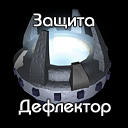
<style>
.page{position:relative;width:128px;height:128px;background:#000000}
.page>*{position:absolute;margin:0}
.t1{font:18px "BauhausC-Medium";color:#ffffff;font-weight:bold}
</style>
<div class="page">
<p class="t1" style="left:33px;top:13px;width:62px;height:16px">Защита</p>
<p class="t1" style="left:18px;top:99px;width:93px;height:18px">Дефлектор</p>
</div>
